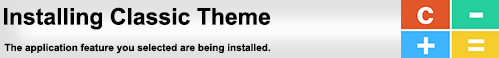
<style>
.page{position:relative;width:499px;height:58px}
.page>*{position:absolute;margin:0}
.t1{font:10px "Arial-BoldMT";color:#000000}
.t2{font:3px "Arial-BoldMT";color:#000000}
.t3{font:23px "Arial-BoldMT";color:#000000}
.t4{font:12px "ArialMT";color:#000000}
</style>
<div class="page">
<p class="t1" style="left:4px;top:7px;width:267px;height:47px"><span class="t2"> </span><span class="t3">Installing Classic Theme<br></span><span class="t4"><br></span> The application feature you selected are being installed.</p>
</div>
